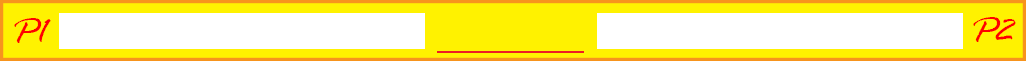
<style>
.page{position:relative;width:1026px;height:61px;background:#fff200}
.page>*{position:absolute;margin:0}
.t1{font:39px "RageItalic";color:#ff0000}
</style>
<div class="page">
<p class="t1" style="left:973px;top:17px;width:43px;height:25px">P2</p>
<p class="t1" style="left:14px;top:18px;width:37px;height:25px">P1</p>
</div>
